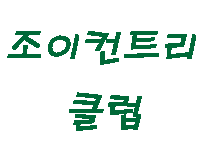
<style>
.page{position:relative;width:200px;height:150px;background:#ffffff}
.page>*{position:absolute;margin:0}
.t1{font:40px/64px "H2porM";letter-spacing:-0.05em;color:#006938;font-weight:bold;font-style:italic}
</style>
<div class="page">
<p class="t1" style="left:7px;top:31px;width:189px;height:100px">조이컨트리<br>     클럽</p>
</div>
